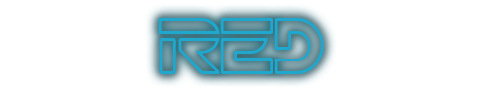
<style>
.page{position:relative;width:480px;height:90px;background:#ffffff}
.page>*{position:absolute;margin:0}
.t1{font:80px "TRN";color:#1fa7cd}
</style>
<div class="page">
<p class="t1" style="left:158px;top:18px;width:166px;height:56px">RED</p>
</div>
